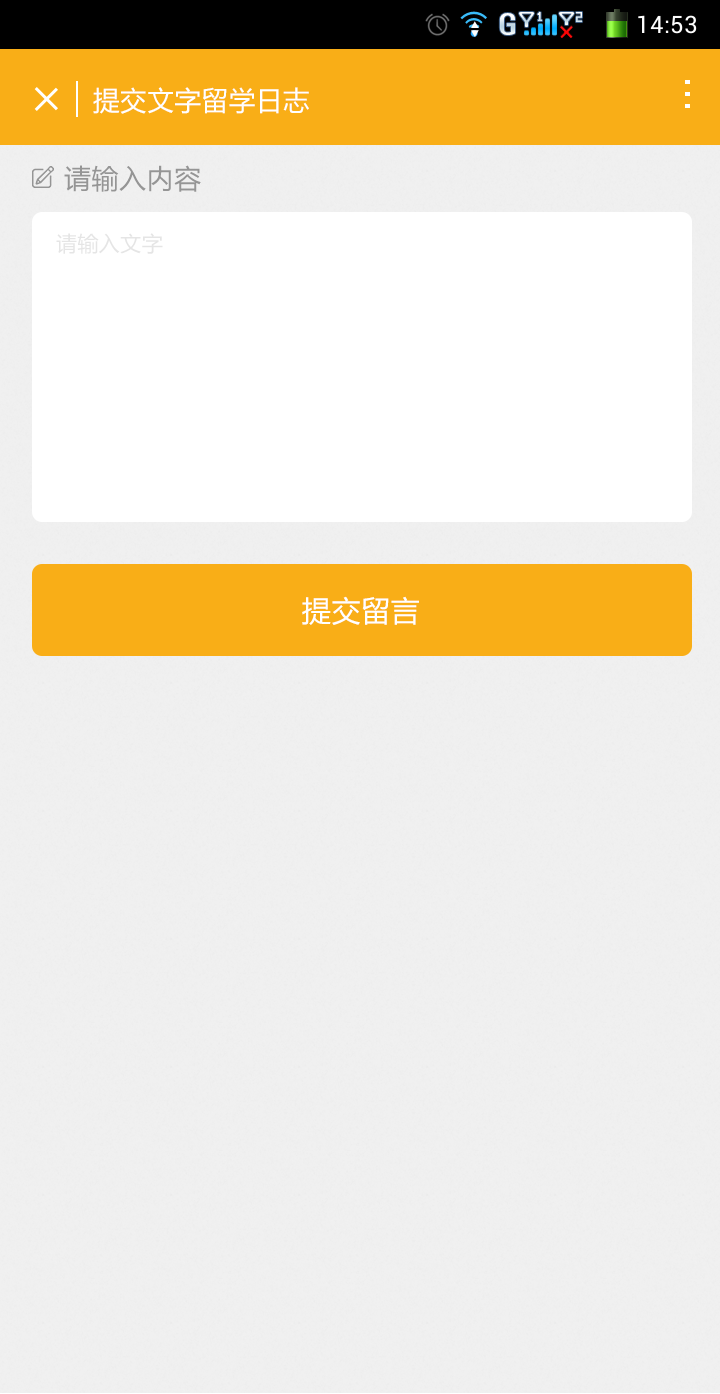
<style>
.page{position:relative;width:720px;height:1394px;background:#f0f0f0}
.page>*{position:absolute;margin:0}
.t1{font:27px "MicrosoftYaHei";letter-spacing:0.02em;color:#ffffff}
.t2{font:27px "MicrosoftYaHei";letter-spacing:0.02em;color:#959595}
.t3{font:21px "MicrosoftYaHei";letter-spacing:0.02em;color:#e5e5e5}
.t4{font:29px "MicrosoftYaHei";letter-spacing:0.02em;color:#ffffff}
</style>
<div class="page">
<p class="t1" style="left:93px;top:87px;width:216px;height:27px">提交文字留学日志</p>
<p class="t2" style="left:64px;top:165px;width:137px;height:27px">请输入内容</p>
<p class="t3" style="left:56px;top:233px;width:107px;height:21px">请输入文字</p>
<p class="t4" style="left:302px;top:596px;width:117px;height:29px">提交留言</p>
</div>
